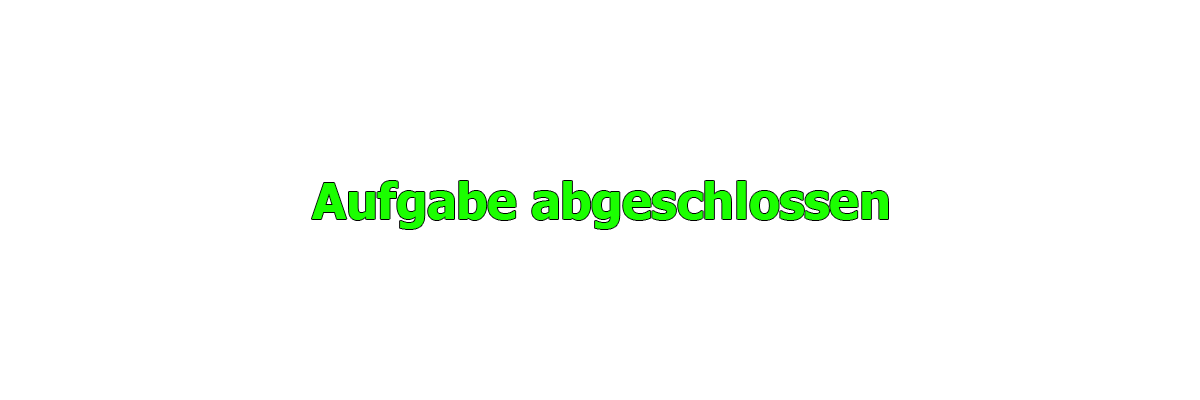
<style>
.page{position:relative;width:1200px;height:400px;background:#ffffff}
.page>*{position:absolute;margin:0}
.t1{font:50px "Tahoma-Bold";letter-spacing:-0.01em;color:#1bff00}
</style>
<div class="page">
<p class="t1" style="left:312px;top:181px;width:576px;height:48px">Aufgabe abgeschlossen</p>
</div>
